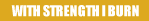
<style>
.page{position:relative;width:149px;height:21px;background:#dda91f}
.page>*{position:absolute;margin:0}
.t1{font:14px "Impact";color:#ffffff}
</style>
<div class="page">
<p class="t1" style="left:11px;top:5px;width:128px;height:12px">WITH STRENGTH I BURN</p>
</div>
